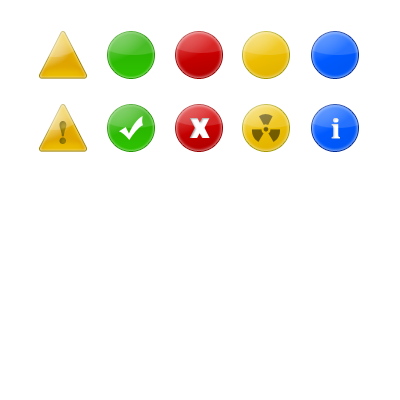
<style>
.page{position:relative;width:400px;height:400px;background:#ffffff}
.page>*{position:absolute;margin:0}
.t1{font:30px "StencilStd";color:#ad8f00}
.t2{font:36px "ShonarBangla-Bold";color:#ffffff;font-weight:bold}
</style>
<div class="page">
<p class="t1" style="left:59px;top:121px;width:8px;height:23px">!</p>
<p class="t2" style="left:331px;top:118px;width:9px;height:21px">i</p>
</div>
